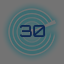
<style>
.page{position:relative;width:64px;height:64px;background:#737373}
.page>*{position:absolute;margin:0}
.t1{font:16px "Orbitron-Medium";color:#0e2853}
</style>
<div class="page">
<p class="t1" style="left:20px;top:25px;width:25px;height:12px">30</p>
</div>
